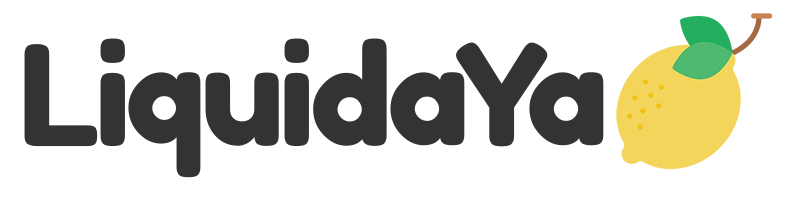
<style>
.page{position:relative;width:800px;height:200px;background:#ffffff}
.page>*{position:absolute;margin:0}
.t1{font:139.1px "FredokaOne-Regular";letter-spacing:-0.04em;color:#333334}
</style>
<div class="page">
<p class="t1" style="left:24px;top:38px;width:580px;height:140px">LiquidaYa</p>
</div>
